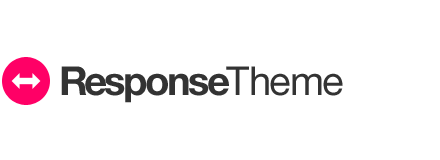
<style>
.page{position:relative;width:440px;height:160px;background:#ffffff}
.page>*{position:absolute;margin:0}
.t1{font:40px "HelveticaNeueLTPro-Bd";letter-spacing:-0.075em;color:#333333}
.t2{font:40px "HelveticaNeueLTPro-Roman";letter-spacing:-0.025em;color:#333333}
</style>
<div class="page">
<p class="t1" style="left:61px;top:66px;width:282px;height:37px">Response<span class="t2">Theme</span></p>
</div>
